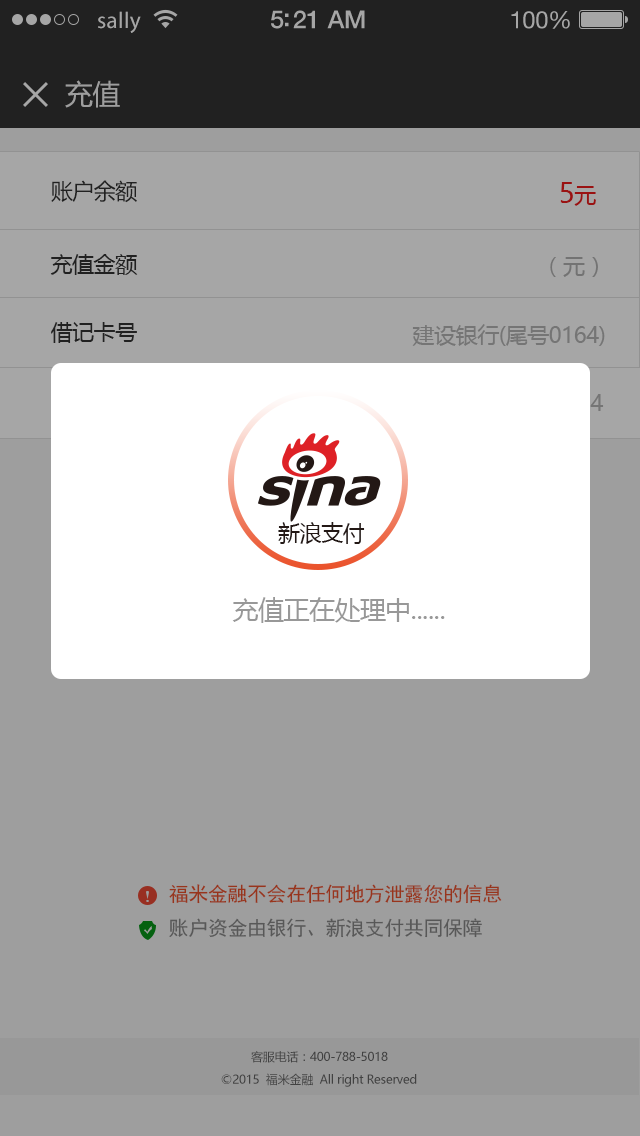
<style>
.page{position:relative;width:640px;height:1136px;background:#9e9e9e}
.page>*{position:absolute;margin:0}
.t1{font:23px "MyriadPro-Regular";letter-spacing:0.02em;color:#a6a6a6}
.t2{font:25px "HelveticaNeue-Medium";letter-spacing:-0.02em;color:#a6a6a6}
.t3{font:24px "HelveticaNeue";letter-spacing:-0.02em;color:#a6a6a6}
.t4{font:28px "MicrosoftYaHei";letter-spacing:-0.02em;color:#9e9e9e}
.t5{font:22px "MicrosoftYaHei";letter-spacing:-0.02em;color:#323232}
.t6{font:28px "MicrosoftYaHei";letter-spacing:-0.02em;color:#9a1212}
.t7{font:22px "MicrosoftYaHei";letter-spacing:-0.02em;color:#9a1212}
.t8{font:22px "MicrosoftYaHei";letter-spacing:-0.02em;color:#737373}
.t9{font:22px "MicrosoftYaHei";letter-spacing:-0.02em;color:#757575}
.t10{font:22px "MicrosoftYaHei";letter-spacing:-0.02em;color:#231815}
.t11{font:26px "MicrosoftYaHei";letter-spacing:-0.02em;color:#989898}
.t12{font:20px "SimHei";letter-spacing:-0.02em;color:#98351c}
.t13{font:20px "SimHei";letter-spacing:-0.02em;color:#585858}
.t14{font:12px "MicrosoftYaHei";letter-spacing:-0.02em;color:#414141}
</style>
<div class="page">
<p class="t1" style="left:98px;top:11px;width:43px;height:22px">sally</p>
<p class="t2" style="left:271px;top:10px;width:94px;height:19px">5:21 AM</p>
<p class="t3" style="left:511px;top:11px;width:59px;height:18px">100%</p>
<p class="t4" style="left:65px;top:80px;width:55px;height:28px">充值</p>
<p class="t5" style="left:51px;top:180px;width:86px;height:23px">账户余额</p>
<p class="t6" style="left:560px;top:182px;width:36px;height:24px">5<span class="t7">元</span></p>
<p class="t5" style="left:50px;top:254px;width:88px;height:21px">充值金额</p>
<p class="t8" style="left:550px;top:257px;width:48px;height:20px">（元）</p>
<p class="t5" style="left:51px;top:322px;width:86px;height:21px">借记卡号</p>
<p class="t9" style="left:412px;top:324px;width:193px;height:22px">建设银行(尾号0164)</p>
<p class="t10" style="left:278px;top:522px;width:87px;height:22px">新浪支付</p>
<p class="t11" style="left:232px;top:597px;width:213px;height:26px">充值正在处理中......</p>
<p class="t12" style="left:169px;top:884px;width:333px;height:20px">福米金融不会在任何地方泄露您的信息</p>
<p class="t13" style="left:169px;top:918px;width:313px;height:20px">账户资金由银行、新浪支付共同保障</p>
<p class="t14" style="left:251px;top:1051px;width:137px;height:12px">客服电话：400-788-5018</p>
<p class="t14" style="left:221px;top:1073px;width:196px;height:14px">©2015  福米金融  All right Reserved</p>
</div>
